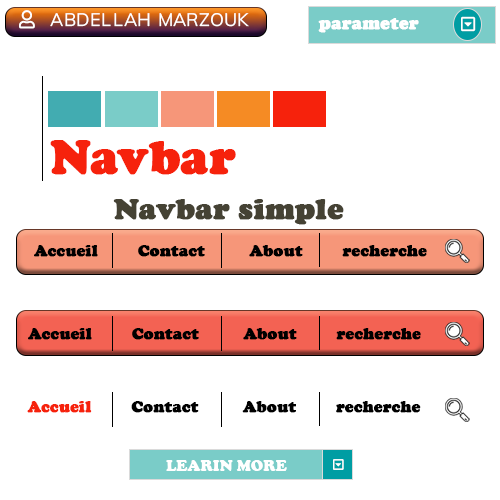
<style>
.page{position:relative;width:500px;height:500px;background:#ffffff}
.page>*{position:absolute;margin:0}
.t1{font:18px "CooperBlack";color:#ffffff;font-weight:bold}
.t2{font:48px "CooperBlack";color:#f6220c;font-weight:bold}
.t3{font:30px "CooperBlack";color:#454234;font-weight:bold}
.t4{font:16px "CooperBlack";color:#000000;font-weight:bold}
.t5{font:16px "CooperBlack";color:#f6220c;font-weight:bold}
.t6{font:16px "CooperBlack";color:#ffffff}
</style>
<div class="page">
<p class="t1" style="left:318px;top:18px;width:101px;height:15px">parameter</p>
<p class="t2" style="left:50px;top:140px;width:186px;height:35px">Navbar</p>
<p class="t3" style="left:113px;top:199px;width:231px;height:26px">Navbar simple</p>
<p class="t4" style="left:34px;top:245px;width:393px;height:12px">Accueil         Contact          About         recherche</p>
<p class="t4" style="left:28px;top:328px;width:393px;height:12px">Accueil         Contact          About         recherche</p>
<p class="t4" style="left:27px;top:401px;width:394px;height:12px"><span class="t5">Accueil</span>         Contact          About         recherche</p>
<p class="t6" style="left:166px;top:460px;width:121px;height:11px">LEARIN MORE</p>
</div>
